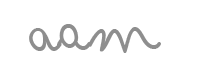
<style>
.page{position:relative;width:197px;height:81px;background:#ffffff}
.page>*{position:absolute;margin:0}
.t1{font:60px "Bimbo-Regular";color:#8e8e8e}
</style>
<div class="page">
<p class="t1" style="left:29px;top:24px;width:132px;height:29px">aam</p>
</div>
